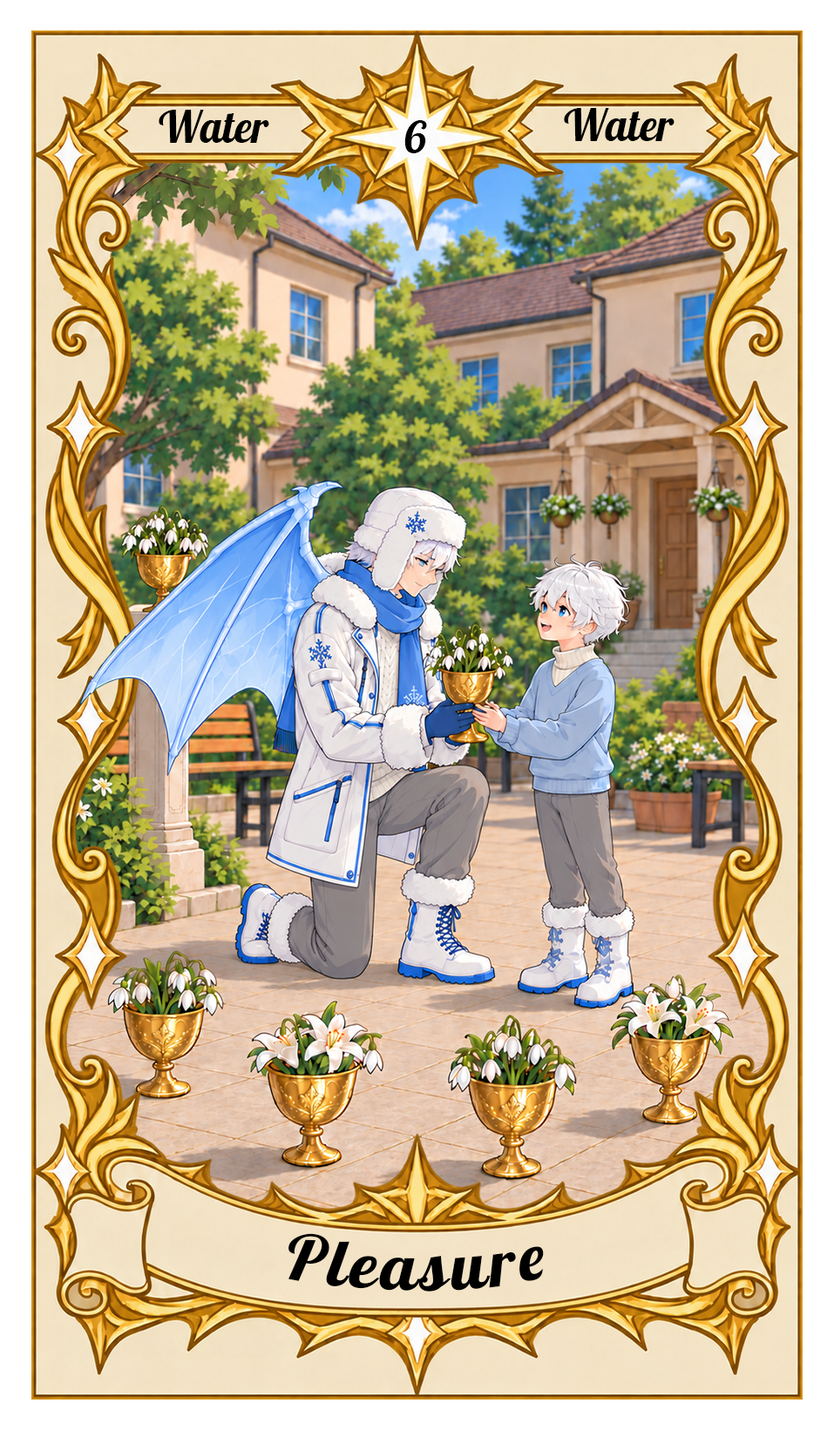
<style>
.page{position:relative;width:834px;height:1430px}
.page>*{position:absolute;margin:0}
.t1{font:43.6px "Lobster-Regular";color:#000000}
.t2{font:65.3px "Lobster-Regular";letter-spacing:0.05em;color:#000000}
</style>
<div class="page">
<p class="t1" style="left:159px;top:110px;width:110px;height:33px">Water</p>
<p class="t1" style="left:564px;top:108px;width:110px;height:33px">Water</p>
<p class="t1" style="left:404px;top:120px;width:23px;height:33px">6</p>
<p class="t2" style="left:288px;top:1233px;width:256px;height:59px">Pleasure</p>
</div>
